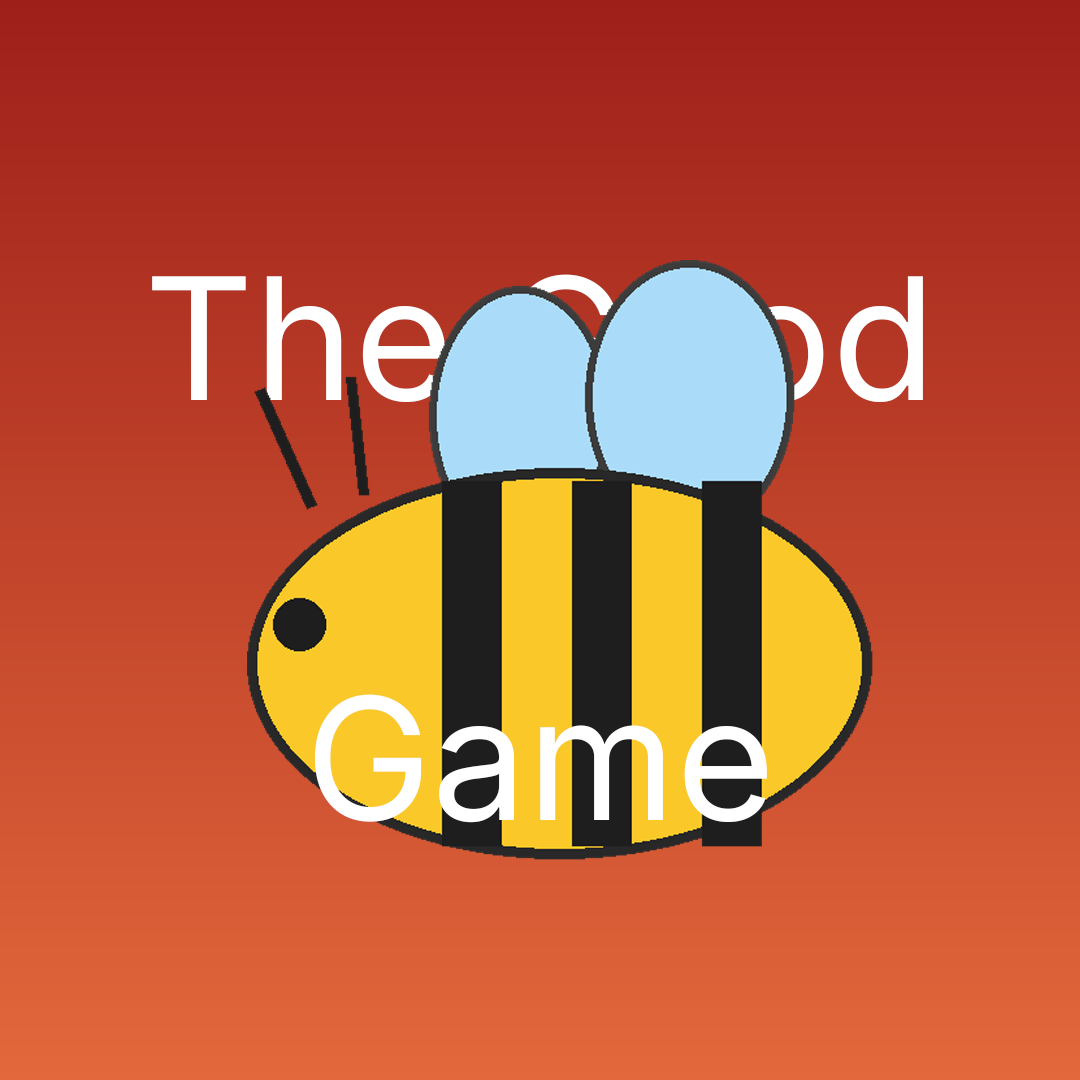
<style>
.page{position:relative;width:1080px;height:1080px}
.page>*{position:absolute;margin:0}
.t1{font:170px "Inter-Regular";color:#ffffff}
</style>
<div class="page">
<p class="t1" style="left:151px;top:274px;width:773px;height:129px">The Good</p>
<p class="t1" style="left:313px;top:694px;width:455px;height:130px">Game</p>
</div>
